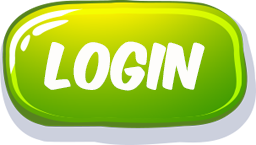
<style>
.page{position:relative;width:256px;height:145px}
.page>*{position:absolute;margin:0}
.t1{font:54px "KomikaAxis";color:#fefdfb}
</style>
<div class="page">
<p class="t1" style="left:44px;top:41px;width:161px;height:50px">login</p>
</div>
